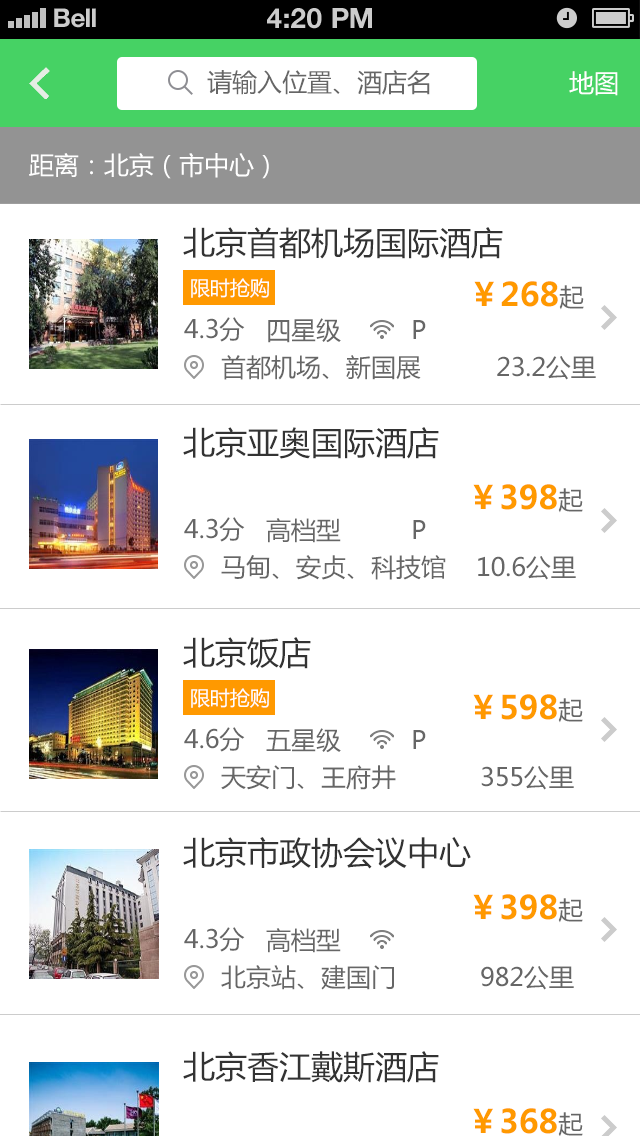
<style>
.page{position:relative;width:640px;height:1136px;background:#ffffff}
.page>*{position:absolute;margin:0}
.t1{font:26px "HelveticaNeue-Bold";color:#cccccc}
.t2{font:28px "HelveticaNeue-Bold";color:#cccccc;text-transform:uppercase}
.t3{font:25px "MicrosoftYaHei";color:#666666}
.t4{font:25px "MicrosoftYaHei";color:#ffffff}
.t5{font:32px "MicrosoftYaHei";color:#333333}
.t6{font:20px "MicrosoftYaHei";color:#ffffff}
.t7{font:32px "MicrosoftYaHei-Bold";color:#ff9900}
</style>
<div class="page">
<p class="t1" style="left:54px;top:8px;width:42px;height:20px">Bell</p>
<p class="t2" style="left:267px;top:8px;width:105px;height:21px">4:20 pM</p>
<p class="t3" style="left:207px;top:70px;width:223px;height:25px">请输入位置、酒店名</p>
<p class="t4" style="left:569px;top:71px;width:49px;height:25px">地图</p>
<p class="t4" style="left:29px;top:153px;width:240px;height:26px">距离：北京（市中心）</p>
<p class="t5" style="left:183px;top:227px;width:320px;height:32px">北京首都机场国际酒店</p>
<p class="t6" style="left:191px;top:278px;width:78px;height:20px">限时抢购</p>
<p class="t7" style="left:474px;top:281px;width:110px;height:29px">￥268<span class="t3">起</span></p>
<p class="t3" style="left:184px;top:317px;width:61px;height:25px">4.3分</p>
<p class="t3" style="left:268px;top:318px;width:73px;height:25px">四星级</p>
<p class="t3" style="left:413px;top:320px;width:13px;height:19px">P</p>
<p class="t3" style="left:221px;top:355px;width:200px;height:25px">首都机场、新国展</p>
<p class="t3" style="left:497px;top:356px;width:99px;height:24px">23.2公里</p>
<p class="t5" style="left:183px;top:427px;width:256px;height:32px">北京亚奥国际酒店</p>
<p class="t7" style="left:473px;top:484px;width:110px;height:29px">￥398<span class="t3">起</span></p>
<p class="t3" style="left:184px;top:517px;width:61px;height:25px">4.3分</p>
<p class="t3" style="left:266px;top:518px;width:75px;height:25px">高档型</p>
<p class="t3" style="left:413px;top:520px;width:13px;height:19px">P</p>
<p class="t3" style="left:221px;top:555px;width:225px;height:25px">马甸、安贞、科技馆</p>
<p class="t3" style="left:478px;top:556px;width:98px;height:24px">10.6公里</p>
<p class="t5" style="left:183px;top:637px;width:128px;height:32px">北京饭店</p>
<p class="t6" style="left:191px;top:688px;width:78px;height:20px">限时抢购</p>
<p class="t7" style="left:473px;top:694px;width:110px;height:29px">￥598<span class="t3">起</span></p>
<p class="t3" style="left:184px;top:727px;width:61px;height:25px">4.6分</p>
<p class="t3" style="left:266px;top:728px;width:75px;height:25px">五星级</p>
<p class="t3" style="left:413px;top:730px;width:13px;height:19px">P</p>
<p class="t3" style="left:221px;top:765px;width:175px;height:25px">天安门、王府井</p>
<p class="t3" style="left:481px;top:766px;width:93px;height:24px">355公里</p>
<p class="t5" style="left:183px;top:837px;width:288px;height:32px">北京市政协会议中心</p>
<p class="t7" style="left:473px;top:894px;width:110px;height:29px">￥398<span class="t3">起</span></p>
<p class="t3" style="left:184px;top:927px;width:61px;height:25px">4.3分</p>
<p class="t3" style="left:266px;top:928px;width:75px;height:25px">高档型</p>
<p class="t3" style="left:221px;top:965px;width:173px;height:25px">北京站、建国门</p>
<p class="t3" style="left:481px;top:966px;width:93px;height:24px">982公里</p>
<p class="t5" style="left:183px;top:1051px;width:256px;height:32px">北京香江戴斯酒店</p>
<p class="t7" style="left:473px;top:1108px;width:110px;height:29px">￥368<span class="t3">起</span></p>
</div>
